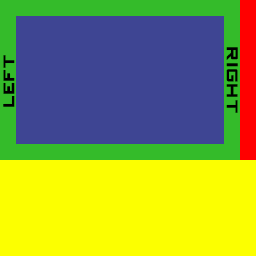
<style>
.page{position:relative;width:256px;height:256px;background:#3e4593}
.page>*{position:absolute;margin:0}
.t1{font:13.6px "GAMECUBENDualSet";letter-spacing:0.02em;color:#000000;scale:0.94 1}
</style>
<div class="page">
<p class="t1" style="left:226px;top:47px;width:12px;height:66px;rotate:90deg">RIGHT</p>
<p class="t1" style="left:3px;top:55px;width:12px;height:52px;rotate:-90deg">LEFT</p>
</div>
